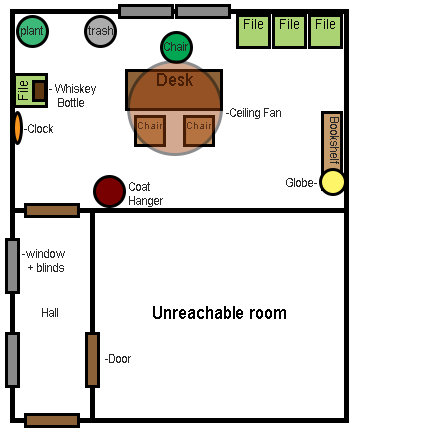
<style>
.page{position:relative;width:432px;height:432px;background:#ffffff}
.page>*{position:absolute;margin:0}
.t1{font:12px "ArialMT";color:#282828;scale:0.95 1}
.t2{font:14px "ArialMT";color:#000000;scale:0.95 1}
.t3{font:18px "ArialMT";color:#481d06;scale:0.95 1}
.t4{font:10px "ArialMT";color:#5e331c;scale:0.95 1}
.t5{font:18px "ArialMT";color:#000000;scale:0.95 1}
</style>
<div class="page">
<p class="t1" style="left:21px;top:26px;width:22px;height:11px">plant</p>
<p class="t1" style="left:88px;top:26px;width:25px;height:9px">trash</p>
<p class="t2" style="left:244px;top:19px;width:19px;height:10px">File</p>
<p class="t2" style="left:280px;top:19px;width:19px;height:10px">File</p>
<p class="t2" style="left:316px;top:19px;width:19px;height:10px">File</p>
<p class="t1" style="left:164px;top:42px;width:24px;height:9px">Chair</p>
<p class="t3" style="left:157px;top:73px;width:36px;height:13px">Desk</p>
<p class="t2" style="left:18px;top:81px;width:10px;height:19px;rotate:-90deg">File</p>
<p class="t1" style="left:49px;top:84px;width:47px;height:23px;text-align:right">- Whiskey <br>   Bottle</p>
<p class="t1" style="left:226px;top:108px;width:55px;height:11px">-Ceiling Fan</p>
<p class="t1" style="left:24px;top:124px;width:29px;height:9px">-Clock</p>
<p class="t4" style="left:138px;top:122px;width:24px;height:7px">Chair</p>
<p class="t4" style="left:187px;top:122px;width:24px;height:7px">Chair</p>
<p class="t1" style="left:330px;top:117px;width:9px;height:47px;rotate:90deg">Bookshelf</p>
<p class="t1" style="left:129px;top:182px;width:34px;height:25px;text-align:right">Coat<br>Hanger</p>
<p class="t1" style="left:286px;top:178px;width:31px;height:9px">Globe-</p>
<p class="t1" style="left:22px;top:249px;width:43px;height:23px;text-align:right">-window<br>  + blinds</p>
<p class="t1" style="left:42px;top:308px;width:16px;height:9px">Hall</p>
<p class="t5" style="left:153px;top:306px;width:133px;height:13px">Unreachable room</p>
<p class="t1" style="left:105px;top:354px;width:26px;height:9px">-Door</p>
</div>
